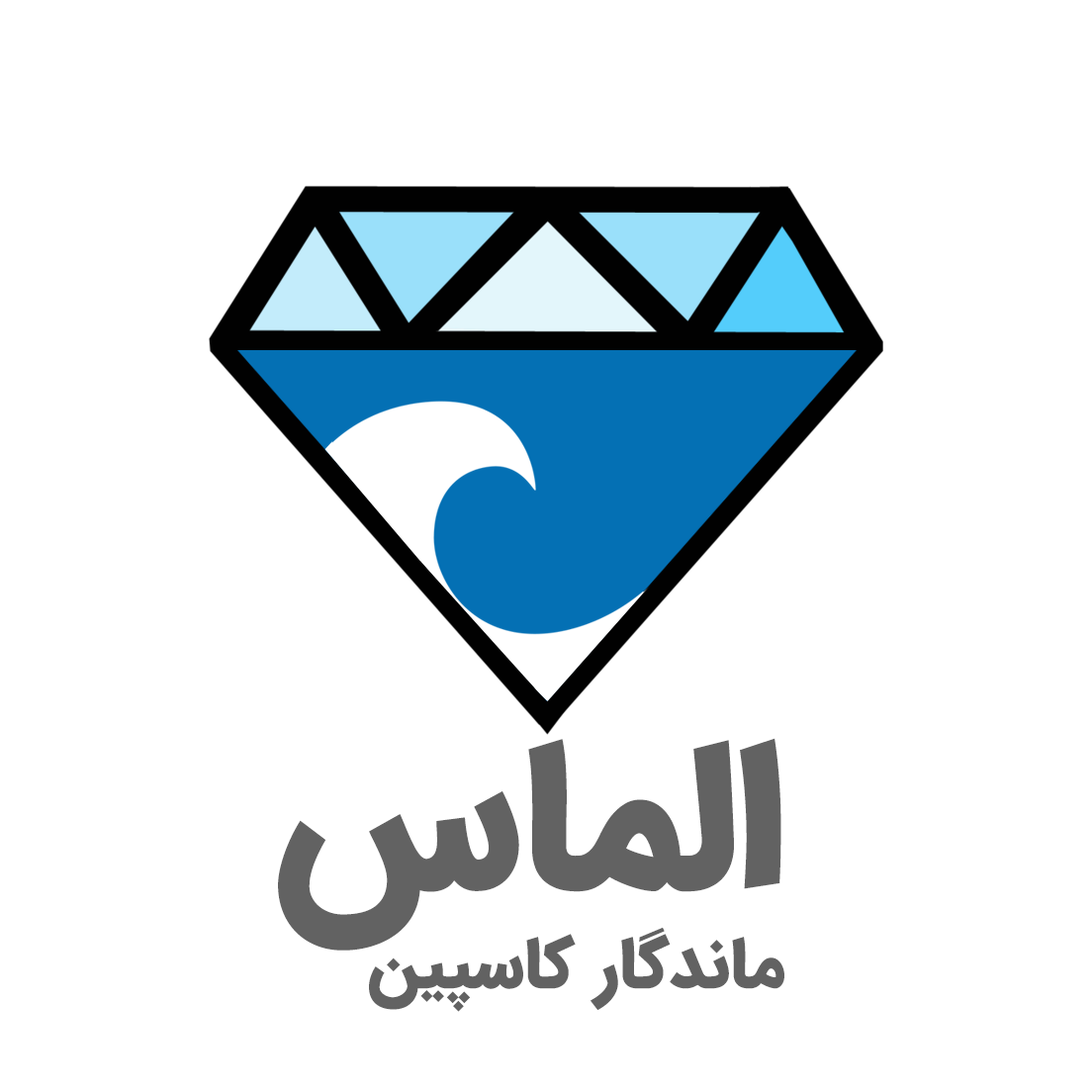
<style>
.page{position:relative;width:1092px;height:1092px;background:#ffffff}
.page>*{position:absolute;margin:0}
.t1{font:70.1px/103px "IRANSansWeb-Black";color:#626262}
.t2{font:206.1px "IRANSansWeb-Black";color:#626262}
</style>
<div class="page">
<p class="t1" style="left:278px;top:738px;width:506px;height:274px;text-align:right"><span class="t2">الماس<br></span>ماندگار کاسپین</p>
</div>
